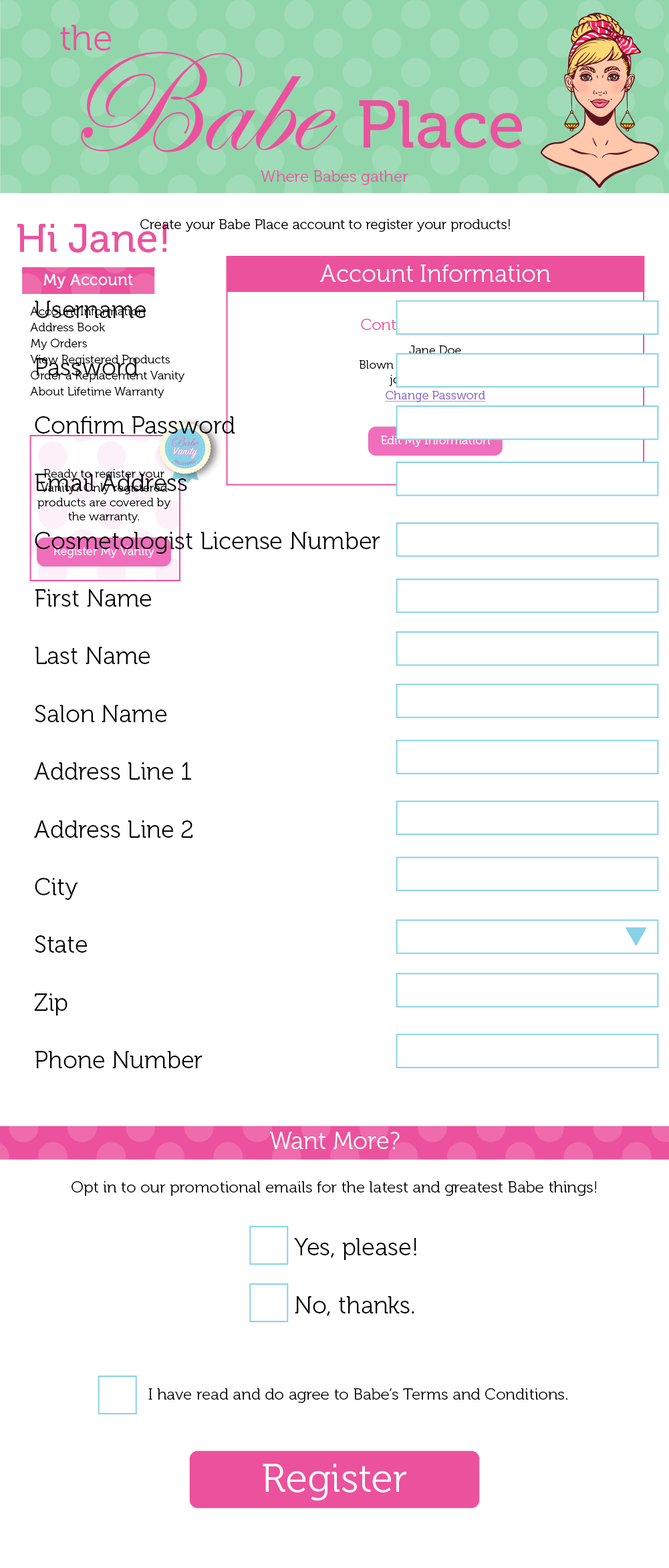
<style>
.page{position:relative;width:669px;height:1568px;background:#ffffff}
.page>*{position:absolute;margin:0}
.t1{font:36px "Museo-300";color:#eb539e}
.t2{font:67.6px "Museo-500";color:#eb539e}
.t3{font:16px "Museo-300";color:#eb539e}
.t4{font:14px "Museo-300";color:#000000}
.t5{font:40.1px "Museo-500";color:#eb539e}
.t6{font:24.1px "Museo-300";color:#ffffff}
.t7{font:16px "Museo-500";color:#ffffff}
.t8{font:24.1px "Museo-300";color:#000000}
.t9{font:12px/16px "Museo-300";color:#000000}
.t10{font:12px "Museo-300"}
.t11{font:16px "Museo-300"}
.t12{font:12px/16px "Museo-500";text-decoration:underline}
.t13{font:12px "Museo-300";color:#ffffff}
.t14{font:12px "Museo-300";color:#000000}
.t15{font:16px "Museo-300";color:#000000}
.t16{font:40.1px "Museo-300";color:#ffffff}
</style>
<div class="page">
<p class="t1" style="left:60px;top:25px;width:51px;height:26px">the</p>
<p class="t1" style="left:60px;top:25px;width:51px;height:26px">the</p>
<p class="t2" style="left:359px;top:100px;width:163px;height:49px">Place</p>
<p class="t2" style="left:359px;top:100px;width:163px;height:49px">Place</p>
<p class="t3" style="left:261px;top:170px;width:147px;height:15px">Where Babes gather</p>
<p class="t3" style="left:261px;top:170px;width:147px;height:15px">Where Babes gather</p>
<p class="t4" style="left:140px;top:219px;width:370px;height:13px">Create your Babe Place account to register your products!</p>
<p class="t5" style="left:17px;top:224px;width:150px;height:29px">Hi Jane!</p>
<p class="t6" style="left:320px;top:265px;width:231px;height:17px">Account Information</p>
<p class="t7" style="left:43px;top:274px;width:90px;height:15px">My Account</p>
<p class="t8" style="left:34px;top:301px;width:346px;height:767px">Username<br><br>Password<br><br>Confirm Password<br><br>Email Address<br><br>Cosmetologist License Number<br><br>First Name<br><br>Last Name<br><br>Salon Name<br><br>Address Line 1<br><br>Address Line 2<br><br>City<br><br>State<br><br>Zip<br><br>Phone Number</p>
<p class="t9" style="left:30px;top:307px;width:154px;height:91px">Account Information<br>Address Book<br>My Orders<br>View Registered Products<br>Order a Replacement Vanity<br>About Lifetime Warranty</p>
<p class="t10" style="left:359px;top:319px;width:152px;height:83px;text-align:center"><span class="t11">Contact Information <br><br></span>Jane Doe<br>Blown Away Salon - 123456<br>jdoe@gmail.com<br><span class="t12">Change Password</span></p>
<p class="t13" style="left:381px;top:436px;width:109px;height:11px">Edit My Information</p>
<p class="t14" style="left:37px;top:469px;width:133px;height:54px;text-align:center">Ready to register your Vanity? Only registered products are covered by the warranty.</p>
<p class="t13" style="left:53px;top:546px;width:101px;height:12px">Register My Vanity</p>
<p class="t6" style="left:270px;top:1132px;width:130px;height:17px">Want More?</p>
<p class="t15" style="left:71px;top:1181px;width:525px;height:15px">Opt in to our promotional emails for the latest and greatest Babe things!</p>
<p class="t8" style="left:294px;top:1238px;width:122px;height:78px">Yes, please!<br><br>No, thanks.</p>
<p class="t15" style="left:148px;top:1388px;width:419px;height:15px">I have read and do agree to Babe’s Terms and Conditions.</p>
<p class="t16" style="left:263px;top:1464px;width:144px;height:37px">Register</p>
</div>
